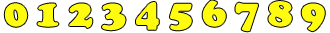
<style>
.page{position:relative;width:330px;height:33px;background:#ffffff}
.page>*{position:absolute;margin:0}
.t1{font:40.1px "CooperBlack";letter-spacing:0.23em;color:#fffc0e}
</style>
<div class="page">
<p class="t1" style="left:4px;top:0px;width:321px;height:32px">0123456789</p>
</div>
